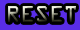
<style>
.page{position:relative;width:80px;height:30px;background:#592de6}
.page>*{position:absolute;margin:0}
.t1{font:20px "OCRAStd"}
</style>
<div class="page">
<p class="t1" style="left:8px;top:6px;width:68px;height:16px">RESET</p>
</div>
